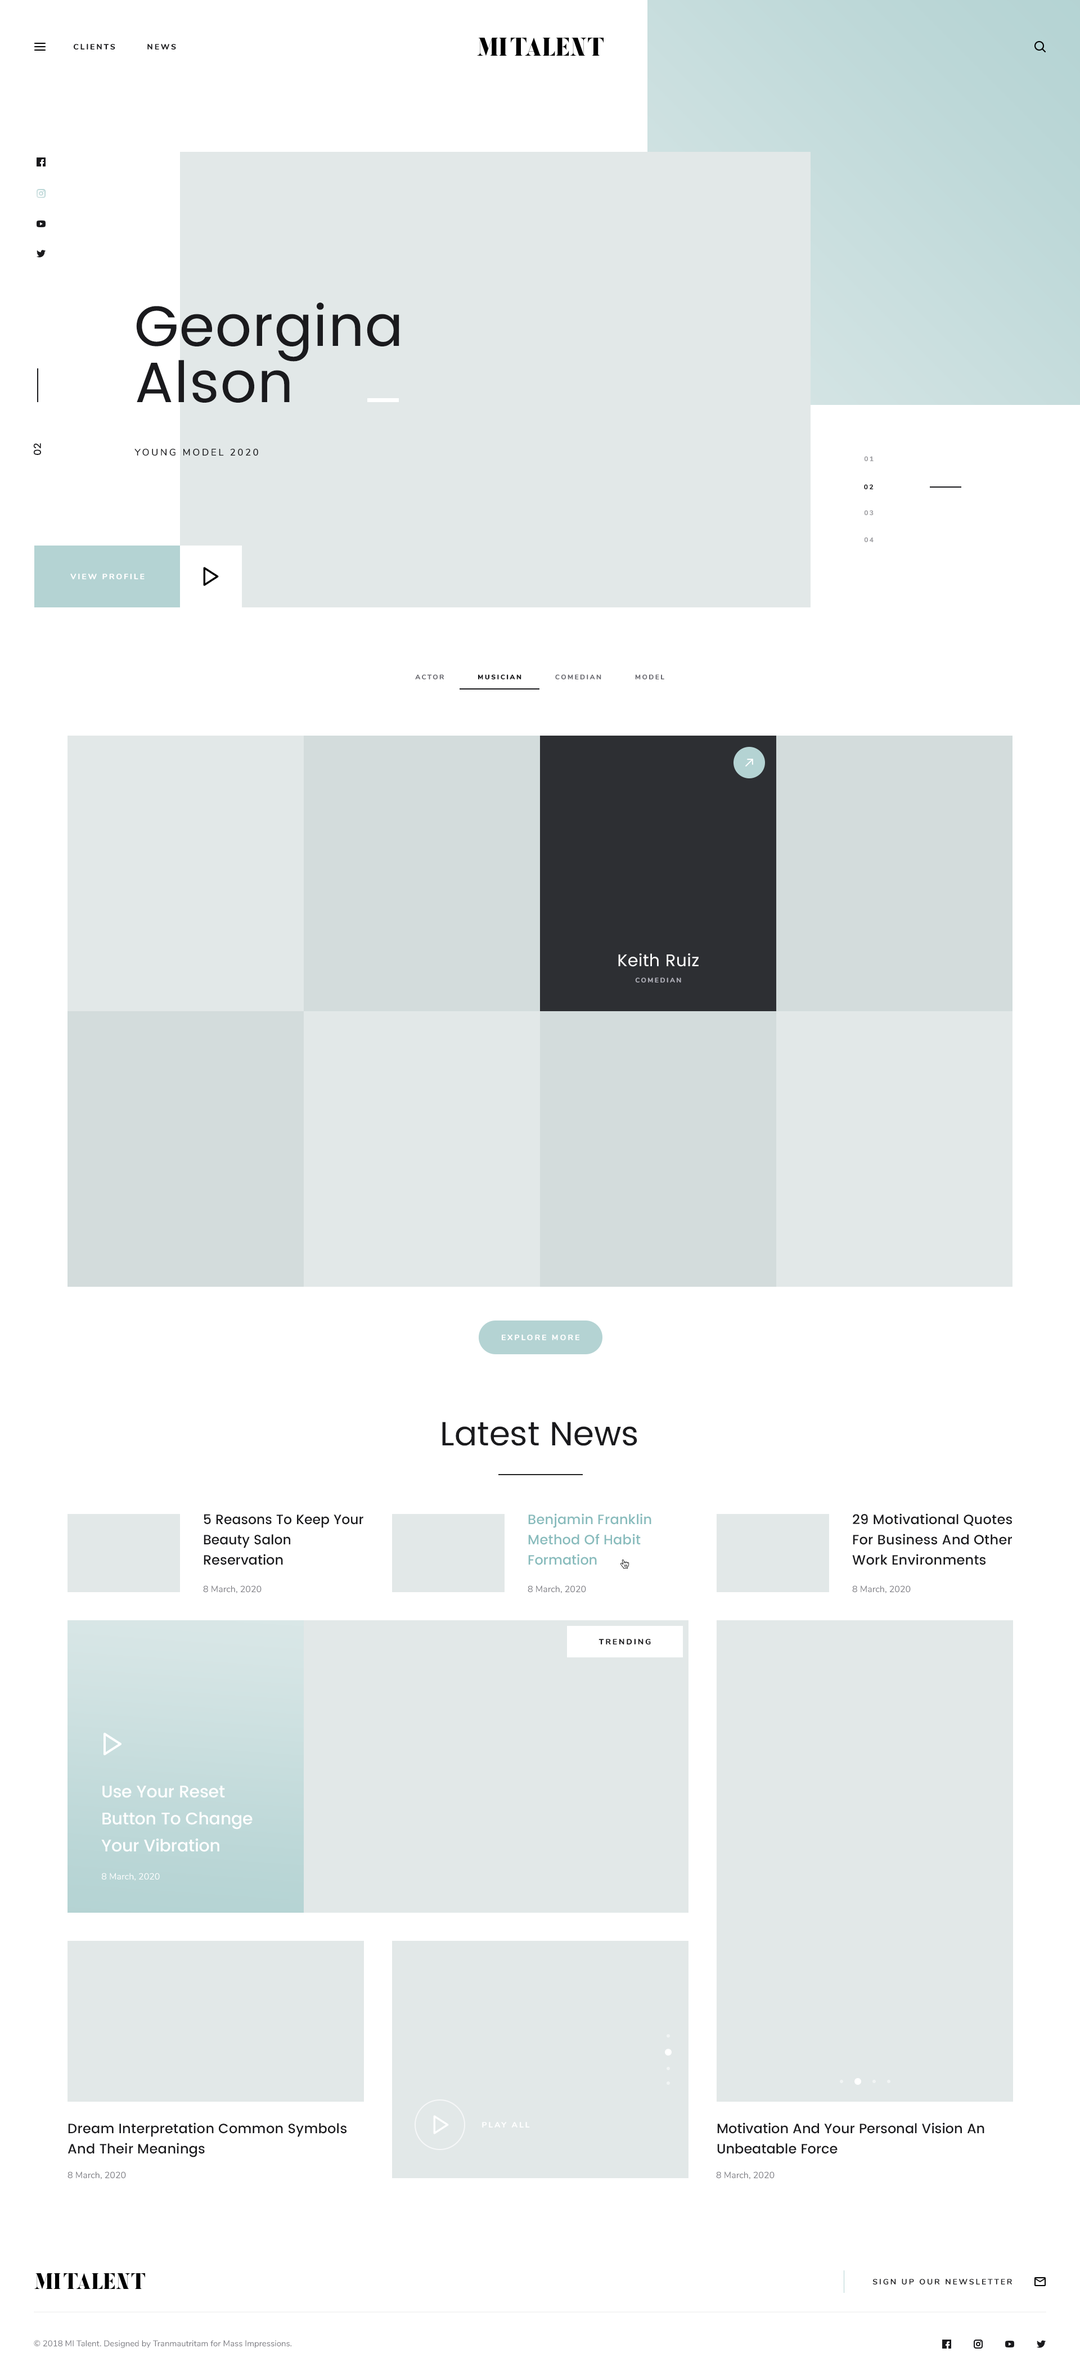
<style>
.page{position:relative;width:1080px;height:2375px;background:#ffffff}
.page>*{position:absolute;margin:0}
.t1{font:7.9px "Nunito-ExtraBold";letter-spacing:0.2em;color:#1a1a1d;text-transform:uppercase}
.t2{font:56.8px/56.3px "Poppins-Regular";letter-spacing:0.02em;color:#1a1a1d}
.t3{font:10.1px "Poppins-Medium";letter-spacing:0.02em;color:#1a1a1d}
.t4{font:9.6px "Nunito-SemiBold";letter-spacing:0.2em;color:#1a1a1d;text-transform:uppercase}
.t5{font:6.8px/27px "Nunito-ExtraBold";letter-spacing:0.2em;color:#9f9fa3;text-transform:uppercase}
.t6{font:6.8px "Nunito-ExtraBold";letter-spacing:0.2em;color:#1a1a1d;text-transform:uppercase}
.t7{font:7.9px "Nunito-ExtraBold";letter-spacing:0.2em;color:#ffffff;text-transform:uppercase}
.t8{font:6.8px "Nunito-ExtraBold";letter-spacing:0.2em;color:#696970;text-transform:uppercase}
.t9{font:6.8px "Nunito-Black";letter-spacing:0.2em;color:#1a1a1d;text-transform:uppercase}
.t10{font:16.9px "Poppins-Regular";letter-spacing:0.02em;color:#ffffff}
.t11{font:6.8px "Nunito-ExtraBold";letter-spacing:0.2em;color:#aeaeb7;text-transform:uppercase}
.t12{font:33.7px "Poppins-Regular";color:#1a1a1d}
.t13{font:13.5px/20.2px "Poppins-Medium";color:#1a1a1d}
.t14{font:13.5px/20.2px "Poppins-Medium";color:#87bbbc}
.t15{font:9px "Nunito-Regular";color:#77777e}
.t16{font:16.9px/27px "Poppins-Medium";letter-spacing:-0.02em;color:#ffffff}
.t17{font:9px "Nunito-Regular";color:#ffffff}
.t18{font:7.9px "Nunito-Bold";letter-spacing:0.2em;color:#1a1a1d;text-transform:uppercase}
.t19{font:8.4px "Nunito-Regular";color:#77777e}
</style>
<div class="page">
<p class="t1" style="left:74px;top:44px;width:102px;height:6px">Clients        News</p>
<p class="t2" style="left:136px;top:303px;width:263px;height:100px">Georgina Alson</p>
<p class="t3" style="left:33px;top:443px;width:8px;height:12px;rotate:-90deg">02</p>
<p class="t4" style="left:134px;top:448px;width:124px;height:8px">young model 2020</p>
<p class="t5" style="left:864px;top:456px;width:10px;height:86px">01<br><br>03<br>04</p>
<p class="t6" style="left:864px;top:484px;width:10px;height:5px">02</p>
<p class="t7" style="left:70px;top:574px;width:75px;height:6px">VIEW PROFILE</p>
<p class="t8" style="left:415px;top:674px;width:249px;height:6px">Actor          <span class="t9">Musician</span>          Comedian          Model</p>
<p class="t10" style="left:618px;top:953px;width:81px;height:14px">Keith Ruiz</p>
<p class="t11" style="left:635px;top:978px;width:46px;height:5px">Comedian</p>
<p class="t7" style="left:502px;top:1335px;width:77px;height:6px">explore more</p>
<p class="t12" style="left:442px;top:1422px;width:195px;height:24px">Latest News</p>
<p class="t13" style="left:204px;top:1514px;width:159px;height:51px">5 Reasons To Keep Your Beauty Salon<br>Reservation</p>
<p class="t14" style="left:528px;top:1514px;width:123px;height:51px">Benjamin Franklin Method Of Habit<br>Formation</p>
<p class="t13" style="left:852px;top:1514px;width:160px;height:51px">29 Motivational Quotes For Business And Other Work Environments</p>
<p class="t15" style="left:203px;top:1586px;width:59px;height:8px">8 March, 2020</p>
<p class="t15" style="left:528px;top:1586px;width:58px;height:8px">8 March, 2020</p>
<p class="t15" style="left:852px;top:1586px;width:59px;height:8px">8 March, 2020</p>
<p class="t1" style="left:599px;top:1639px;width:52px;height:6px">trending</p>
<p class="t16" style="left:101px;top:1786px;width:152px;height:66px">Use Your Reset Button To Change Your Vibration</p>
<p class="t17" style="left:102px;top:1873px;width:58px;height:8px">8 March, 2020</p>
<p class="t13" style="left:68px;top:2123px;width:279px;height:35px">Dream Interpretation Common Symbols And Their Meanings</p>
<p class="t7" style="left:482px;top:2122px;width:48px;height:6px">play all</p>
<p class="t13" style="left:717px;top:2123px;width:267px;height:31px">Motivation And Your Personal Vision An<br>Unbeatable Force</p>
<p class="t15" style="left:68px;top:2172px;width:58px;height:8px">8 March, 2020</p>
<p class="t15" style="left:716px;top:2172px;width:59px;height:8px">8 March, 2020</p>
<p class="t18" style="left:872px;top:2279px;width:140px;height:6px">sign up our newsletter</p>
<p class="t19" style="left:34px;top:2341px;width:257px;height:7px">© 2018 MI Talent. Designed by Tranmautritam for Mass Impressions.</p>
</div>
